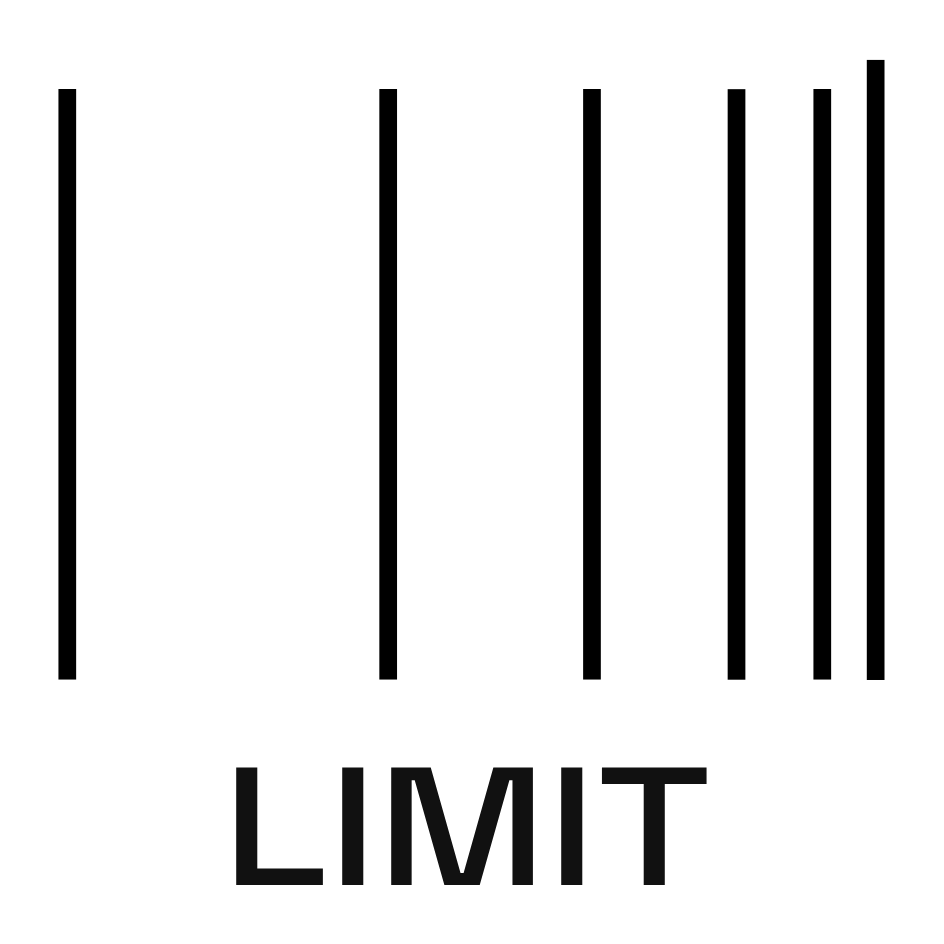
<style>
.page{position:relative;width:944px;height:944px;background:#ffffff}
.page>*{position:absolute;margin:0}
.t1{font:168px "SpaceGroteskLight-Medium";color:#111111;scale:1.16 1}
</style>
<div class="page">
<p class="t1" style="left:236px;top:767px;width:471px;height:118px">LIMIT</p>
</div>
